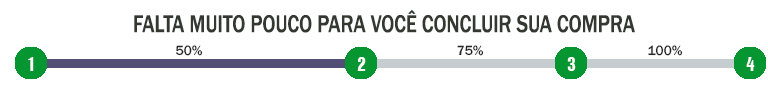
<style>
.page{position:relative;width:768px;height:85px;background:#ffffff}
.page>*{position:absolute;margin:0}
.t1{font:25.4px "FranklinGothic-Medium";color:#343831;scale:0.79 1}
.t2{font:13.8px "FranklinGothic-Medium";color:#242425}
.t3{font:17.7px "HelveticaInseratCyr-Upright";color:#ffffff;scale:0.91 1}
</style>
<div class="page">
<p class="t1" style="left:134px;top:9px;width:501px;height:24px">FALTA MUITO POUCO PARA VOCÊ CONCLUIR SUA COMPRA</p>
<p class="t2" style="left:176px;top:45px;width:27px;height:11px">50%</p>
<p class="t2" style="left:457px;top:45px;width:27px;height:11px">75%</p>
<p class="t2" style="left:648px;top:45px;width:35px;height:11px">100%</p>
<p class="t3" style="left:28px;top:57px;width:6px;height:14px">1</p>
<p class="t3" style="left:357px;top:57px;width:9px;height:14px">2</p>
<p class="t3" style="left:567px;top:57px;width:9px;height:14px">3</p>
<p class="t3" style="left:746px;top:57px;width:9px;height:14px">4</p>
</div>
